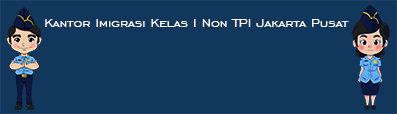
<style>
.page{position:relative;width:397px;height:114px;background:#11375c}
.page>*{position:absolute;margin:0}
.t1{font:15.2px "EngraversGothicBT-Regular";color:#ffffff}
</style>
<div class="page">
<p class="t1" style="left:45px;top:19px;width:304px;height:8px">Kantor Imigrasi Kelas I Non TPI Jakarta Pusat</p>
</div>
